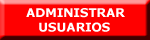
<style>
.page{position:relative;width:150px;height:40px;background:#ff0000}
.page>*{position:absolute;margin:0}
.t1{font:12px "Verdana-Bold";color:#ffffff}
</style>
<div class="page">
<p class="t1" style="left:26px;top:8px;width:99px;height:24px">ADMINISTRAR<br>   USUARIOS</p>
</div>
